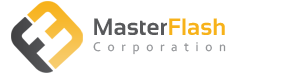
<style>
.page{position:relative;width:300px;height:73px;background:#ffffff}
.page>*{position:absolute;margin:0}
.t1{font:23.7px "Sansation-Bold";color:#58595b}
.t2{font:23.7px "Sansation-Bold";color:#f7b21a}
.t3{font:13.3px "Corbel";letter-spacing:0.497em;color:#939598}
</style>
<div class="page">
<p class="t1" style="left:94px;top:18px;width:131px;height:17px">Master<span class="t2">Flash</span></p>
<p class="t3" style="left:93px;top:42px;width:133px;height:13px">Corporation</p>
</div>
